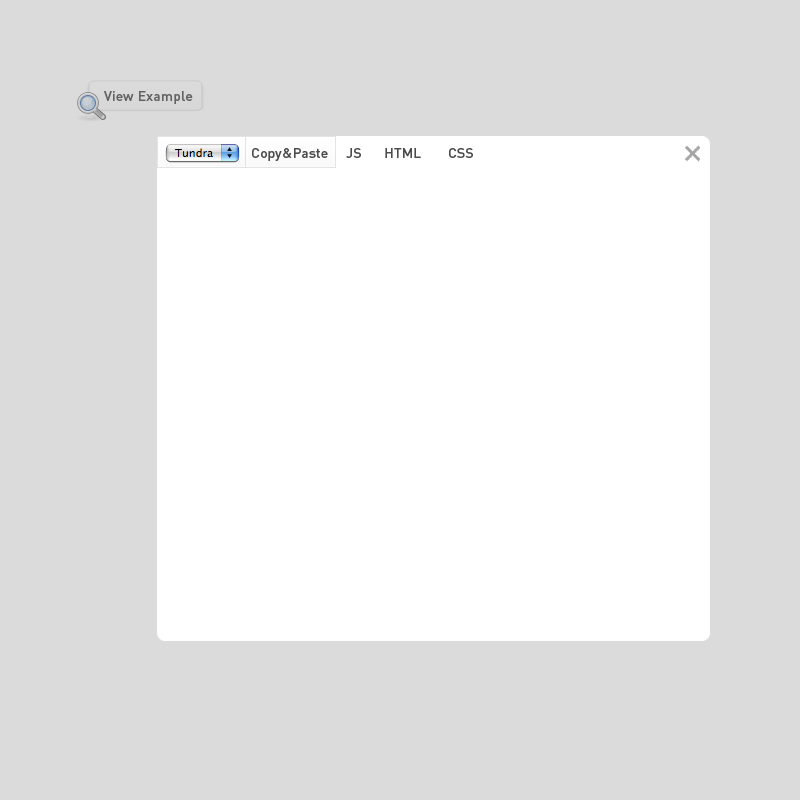
<style>
.page{position:relative;width:800px;height:800px;background:#dbdbdb}
.page>*{position:absolute;margin:0}
.t1{font:14px "DIN-Medium";letter-spacing:0.01em;color:#616161}
.t2{font:14px "DIN-Medium";letter-spacing:0.01em;color:#4b4b4b}
</style>
<div class="page">
<p class="t1" style="left:104px;top:91px;width:89px;height:13px">View Example</p>
<p class="t2" style="left:252px;top:148px;width:76px;height:13px">Copy&amp;Paste</p>
<p class="t2" style="left:346px;top:148px;width:15px;height:10px">JS</p>
<p class="t2" style="left:385px;top:148px;width:36px;height:10px">HTML</p>
<p class="t2" style="left:449px;top:148px;width:24px;height:10px">CSS</p>
</div>
